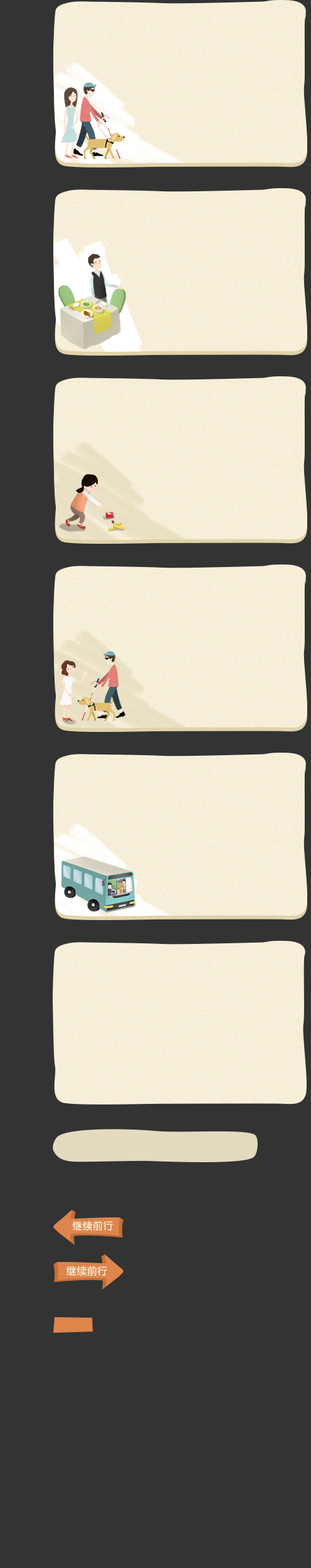
<style>
.page{position:relative;width:311px;height:1568px;background:#333333}
.page>*{position:absolute;margin:0}
.t1{font:10px "JZunYuan";letter-spacing:0.025em;color:#f1efd8}
.t2{font:10px "MicrosoftYaHei";letter-spacing:0.025em;color:#f1efd8}
</style>
<div class="page">
<p class="t1" style="left:72px;top:1221px;width:42px;height:10px">继续前行</p>
<p class="t2" style="left:66px;top:1266px;width:41px;height:10px">继续前行</p>
</div>
